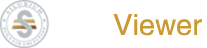
<style>
.page{position:relative;width:207px;height:48px;background:#ffffff}
.page>*{position:absolute;margin:0}
.t1{font:29.2px "FZHTK--GBK1-0";color:#cc9933}
</style>
<div class="page">
<p class="t1" style="left:113px;top:14px;width:89px;height:22px">Viewer</p>
</div>
